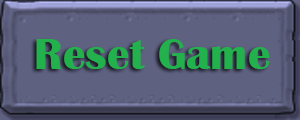
<style>
.page{position:relative;width:300px;height:120px;background:#5f6181}
.page>*{position:absolute;margin:0}
.t1{font:45.3px "BritannicBold";color:#22b14c}
</style>
<div class="page">
<p class="t1" style="left:36px;top:39px;width:234px;height:30px">Reset Game</p>
</div>
